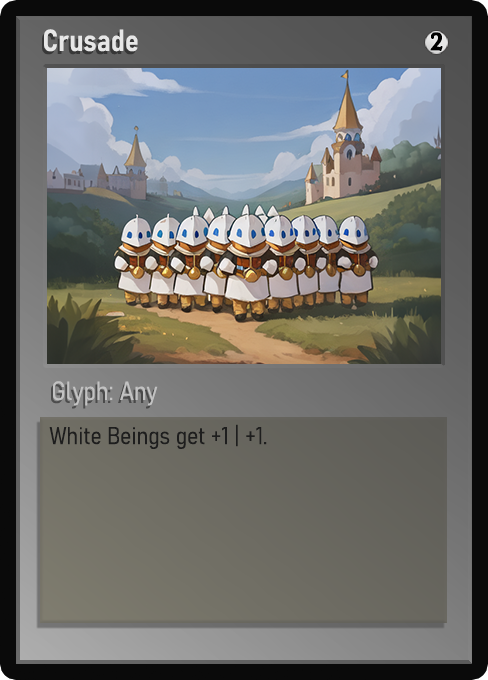
<style>
.page{position:relative;width:488px;height:680px}
.page>*{position:absolute;margin:0}
.t1{font:30px "Bahnschrift-SemiBoldSemiCondensed";color:#f2f2f2;font-weight:bold}
.t2{font:25px "WTRRoycroft";color:#000000;font-weight:bold;scale:1.09 1}
.t3{font:26px "Bahnschrift-LightSemiCondensed";color:#c8c8c8;font-weight:bold}
.t4{font:24px "Bahnschrift-LightSemiCondensed";color:#1e1e1e;font-weight:bold}
</style>
<div class="page">
<p class="t1" style="left:44px;top:29px;width:94px;height:23px;opacity:0.9">Crusade</p>
<p class="t2" style="left:430px;top:32px;width:13px;height:19px">2</p>
<p class="t3" style="left:53px;top:381px;width:105px;height:25px;opacity:0.9">Glyph: Any</p>
<p class="t4" style="left:49px;top:424px;width:218px;height:25px">White Beings get +1 | +1.</p>
</div>
